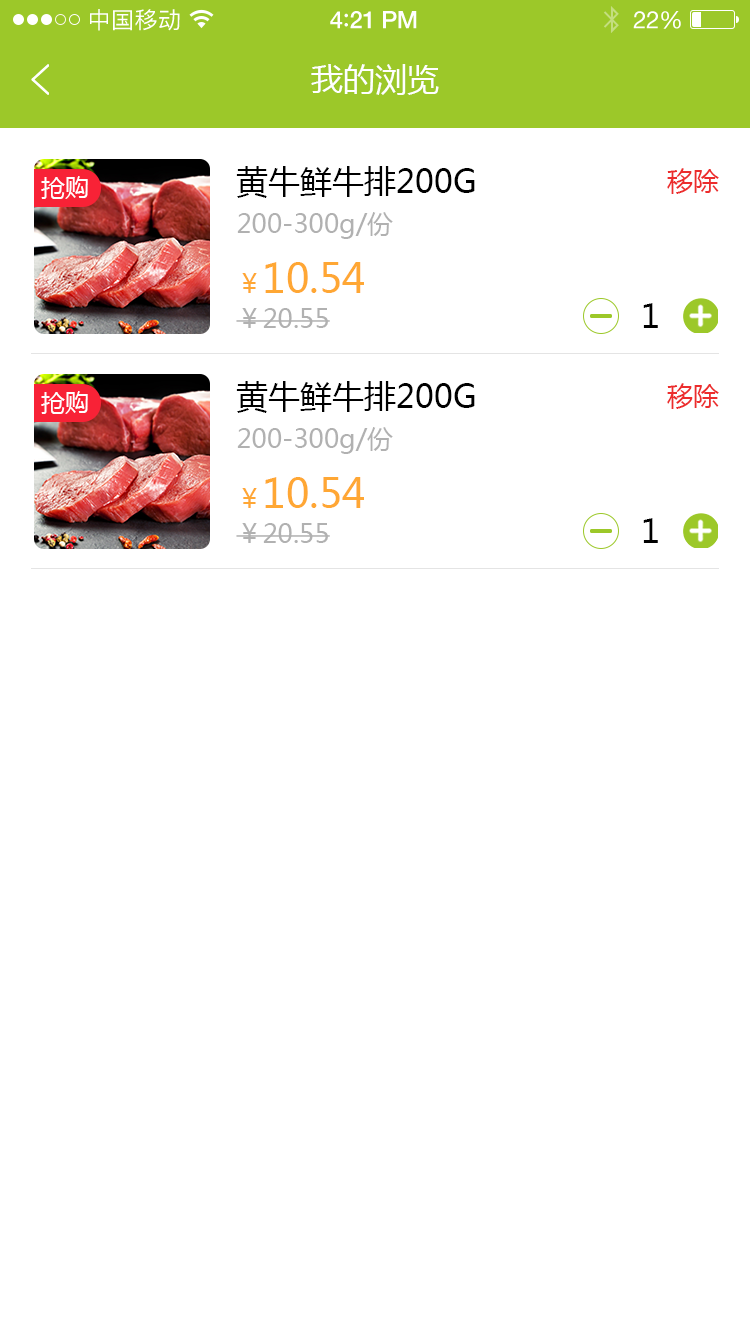
<style>
.page{position:relative;width:750px;height:1334px;background:#ffffff}
.page>*{position:absolute;margin:0}
.t1{font:23px "PingFangSC-Regular";letter-spacing:0.02em;color:#ffffff}
.t2{font:24px "HelveticaNeue-Medium";letter-spacing:-0.02em;color:#ffffff}
.t3{font:26px "Avenir-Medium";letter-spacing:-0.02em;color:#ffffff}
.t4{font:24px "HelveticaNeue";letter-spacing:-0.02em;color:#ffffff}
.t5{font:32px "MicrosoftYaHei";color:#ffffff;text-transform:uppercase}
.t6{font:32px "MicrosoftYaHei";color:#000000;text-transform:uppercase}
.t7{font:26px "MicrosoftYaHei";color:#ec2d2d;text-transform:uppercase}
.t8{font:24px "MicrosoftYaHei";color:#ffffff;text-transform:uppercase}
.t9{font:26px "MicrosoftYaHei";color:#b1b1b1}
.t10{font:40px "MicrosoftYaHei";color:#ffa734}
.t11{font:26px "MicrosoftYaHei";color:#ffa734}
.t12{font:32px "MicrosoftYaHei";letter-spacing:0.08em;color:#000000;text-transform:uppercase}
</style>
<div class="page">
<p class="t1" style="left:90px;top:9px;width:90px;height:22px">中国移动</p>
<p class="t2" style="left:330px;top:11px;width:87px;height:18px">4<span class="t3">:</span>21 PM</p>
<p class="t4" style="left:633px;top:11px;width:48px;height:18px">22%</p>
<p class="t5" style="left:311px;top:64px;width:128px;height:31px">我的浏览</p>
<p class="t6" style="left:236px;top:166px;width:239px;height:32px">黄牛鲜牛排200g</p>
<p class="t7" style="left:667px;top:168px;width:52px;height:26px">移除</p>
<p class="t8" style="left:41px;top:176px;width:47px;height:23px">抢购</p>
<p class="t9" style="left:237px;top:212px;width:156px;height:27px">200-300g/份</p>
<p class="t10" style="left:242px;top:262px;width:122px;height:31px"><span class="t11">￥</span>10.54</p>
<p class="t12" style="left:643px;top:303px;width:15px;height:25px">1</p>
<p class="t9" style="left:236px;top:308px;width:94px;height:20px">￥20.55</p>
<p class="t6" style="left:236px;top:381px;width:239px;height:32px">黄牛鲜牛排200g</p>
<p class="t7" style="left:667px;top:383px;width:52px;height:26px">移除</p>
<p class="t8" style="left:41px;top:391px;width:47px;height:23px">抢购</p>
<p class="t9" style="left:237px;top:427px;width:156px;height:27px">200-300g/份</p>
<p class="t10" style="left:242px;top:477px;width:122px;height:31px"><span class="t11">￥</span>10.54</p>
<p class="t12" style="left:643px;top:518px;width:15px;height:25px">1</p>
<p class="t9" style="left:236px;top:523px;width:94px;height:20px">￥20.55</p>
</div>
